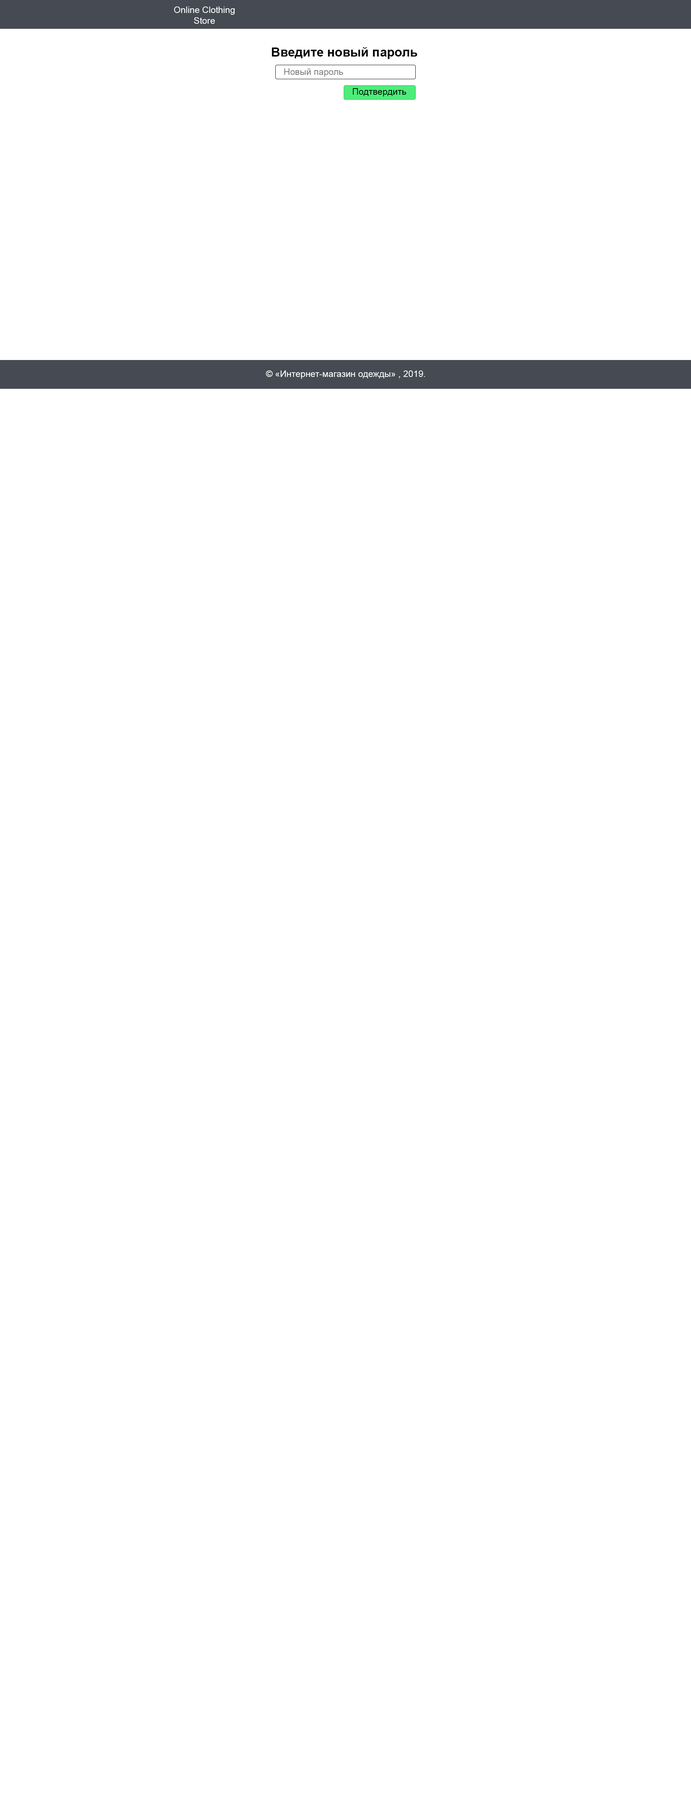
<style>
.page{position:relative;width:691px;height:1800px;background:#ffffff}
.page>*{position:absolute;margin:0}
.t1{font:9px "ArialMT";color:#ffffff}
.t2{font:12.6px "Arial-BoldMT";color:#000000}
</style>
<div class="page">
<p class="t1" style="left:174px;top:6px;width:61px;height:18px;text-align:center">Online Clothing <br>Store</p>
<p class="t2" style="left:272px;top:47px;width:146px;height:12px">Введите новый пароль</p>
<p class="t1" style="left:266px;top:370px;width:159px;height:9px">© «Интернет-магазин одежды» , 2019.</p>
</div>
